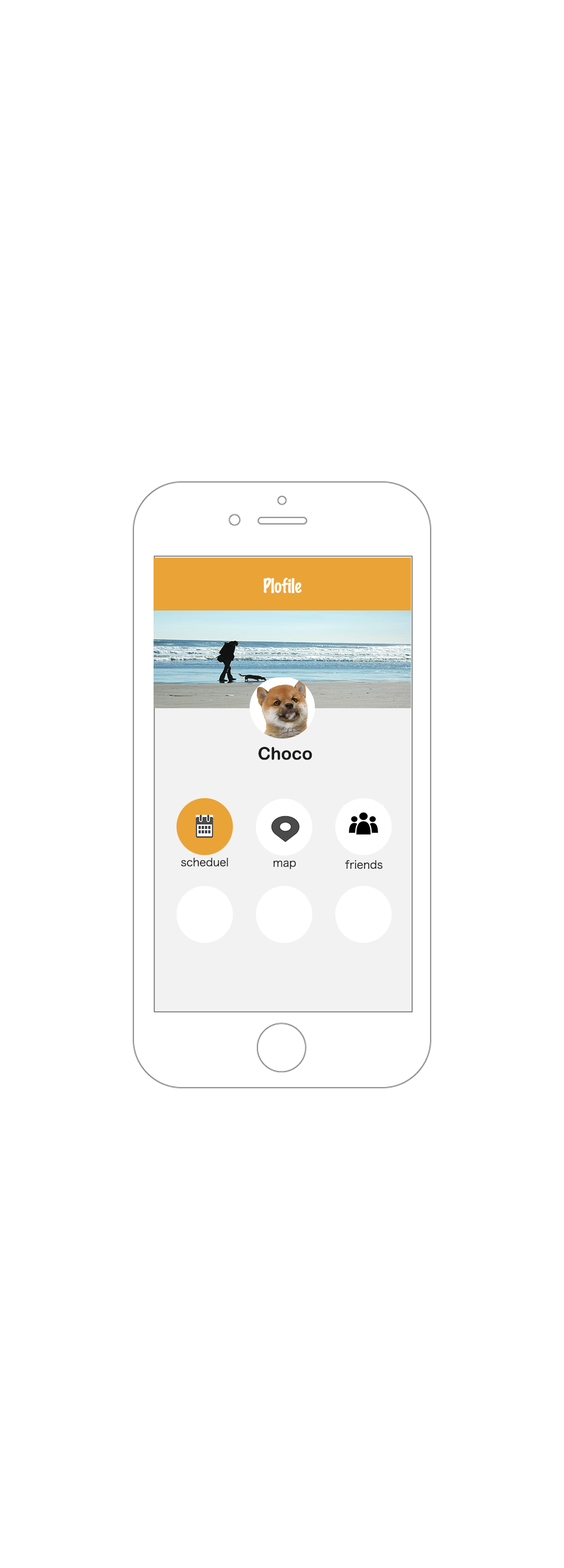
<style>
.page{position:relative;width:564px;height:1568px;background:#ffffff}
.page>*{position:absolute;margin:0}
.t1{font:17.4px "MarkerFelt-Thin";color:#ffffff}
.t2{font:17.4px "ArialRoundedMTBold";color:#1d1a1a}
.t3{font:10.9px "HiraKakuProN-W3";color:#1d1a1a}
</style>
<div class="page">
<p class="t1" style="left:263px;top:578px;width:39px;height:15px">Plofile</p>
<p class="t2" style="left:259px;top:747px;width:54px;height:13px">Choco</p>
<p class="t3" style="left:181px;top:858px;width:47px;height:9px">scheduel</p>
<p class="t3" style="left:273px;top:860px;width:23px;height:9px">map</p>
<p class="t3" style="left:345px;top:860px;width:38px;height:9px">friends</p>
</div>
